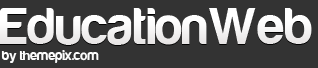
<style>
.page{position:relative;width:318px;height:68px;background:#333333}
.page>*{position:absolute;margin:0}
.t1{font:54px "Harabara";letter-spacing:0.01em;color:#f8f7f7}
.t2{font:14px "Harabara";color:#fcfcfc}
</style>
<div class="page">
<p class="t1" style="left:0px;top:8px;width:312px;height:37px">EducationWeb</p>
<p class="t2" style="left:1px;top:50px;width:98px;height:13px">by themepix.com</p>
</div>
